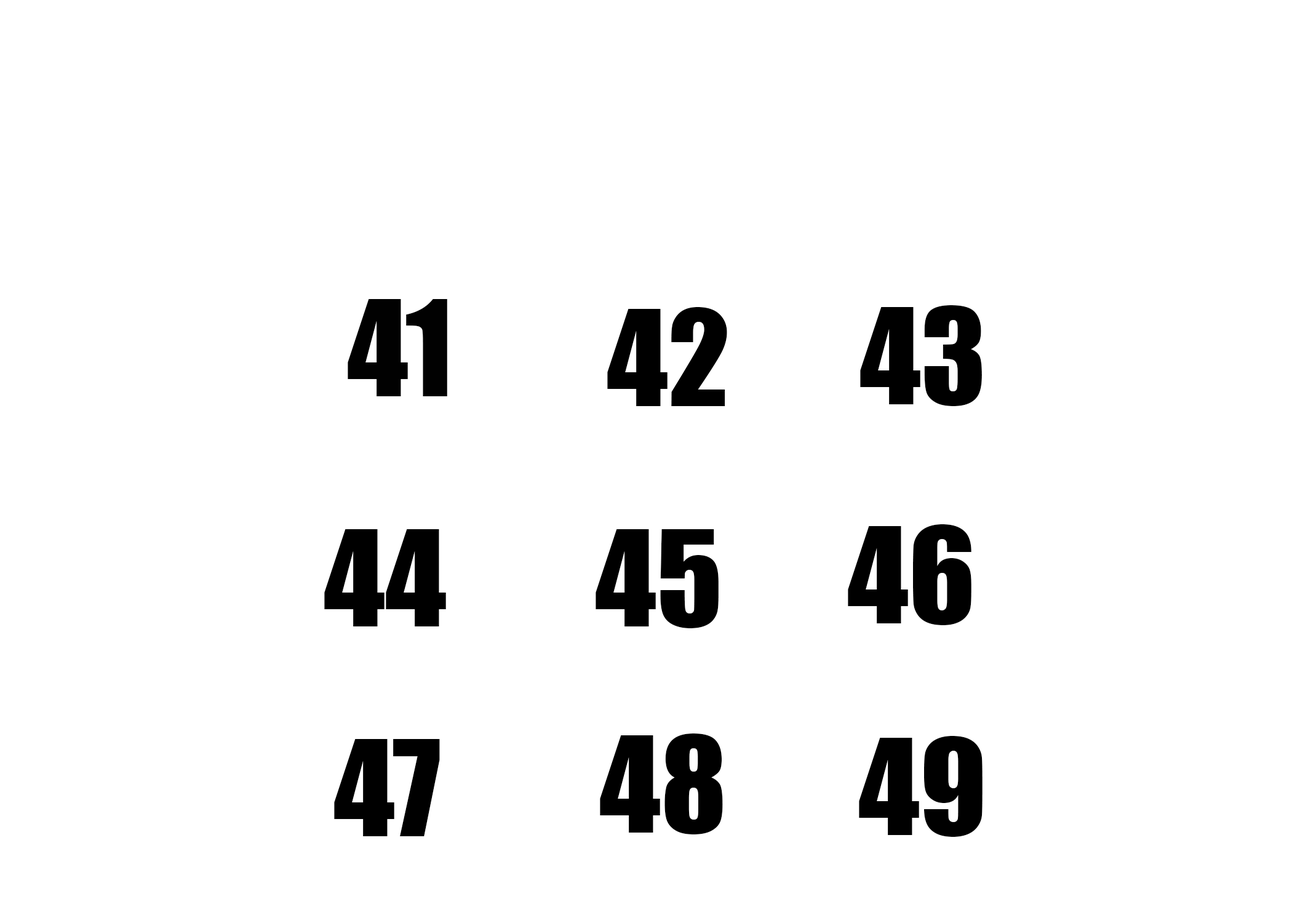
<style>
.page{position:relative;width:1292px;height:923px;background:#ffffff}
.page>*{position:absolute;margin:0}
.t1{font:123.1px "Impact";color:#010101}
.t2{font:123.1px "Impact";color:#000000}
</style>
<div class="page">
<p class="t1" style="left:348px;top:299px;width:99px;height:97px">41</p>
<p class="t2" style="left:860px;top:305px;width:122px;height:101px">43</p>
<p class="t2" style="left:607px;top:307px;width:120px;height:99px">42</p>
<p class="t2" style="left:324px;top:529px;width:122px;height:97px">44</p>
<p class="t2" style="left:596px;top:529px;width:123px;height:99px">45</p>
<p class="t2" style="left:848px;top:524px;width:124px;height:101px">46</p>
<p class="t2" style="left:600px;top:733px;width:123px;height:101px">48</p>
<p class="t2" style="left:859px;top:736px;width:124px;height:101px">49</p>
<p class="t2" style="left:334px;top:739px;width:106px;height:97px">47</p>
</div>
